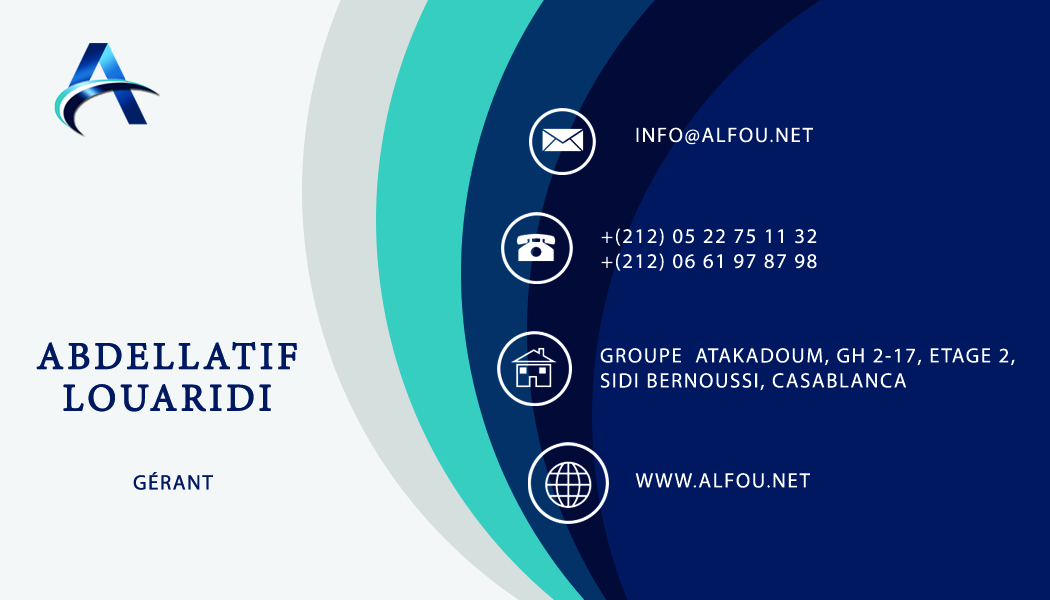
<style>
.page{position:relative;width:1050px;height:600px;background:#00185f}
.page>*{position:absolute;margin:0}
.t1{font:20.8px "MyriadPro-Regular";letter-spacing:0.075em;color:#ffffff}
.t2{font:41.7px/41.7px "AdobeGurmukhi-Regular";letter-spacing:0.075em;color:#00185f;font-weight:bold}
.t3{font:20.8px "MyriadPro-Regular";letter-spacing:0.075em;color:#00185f}
</style>
<div class="page">
<p class="t1" style="left:636px;top:127px;width:177px;height:18px">INFO@ALFOU.NET</p>
<p class="t1" style="left:601px;top:228px;width:216px;height:43px;text-align:center">+(212) 05 22 75 11 32<br>+(212) 06 61 97 87 98</p>
<p class="t2" style="left:36px;top:342px;width:261px;height:70px;text-align:center">ABDELLATIF<br>LOUARIDI</p>
<p class="t1" style="left:600px;top:348px;width:415px;height:43px">GROUPE  ATAKADOUM, GH 2-17, ETAGE 2,<br>SIDI BERNOUSSI, CASABLANCA</p>
<p class="t3" style="left:133px;top:472px;width:80px;height:18px">GÉRANT</p>
<p class="t1" style="left:635px;top:473px;width:175px;height:15px">WWW.ALFOU.NET</p>
</div>
